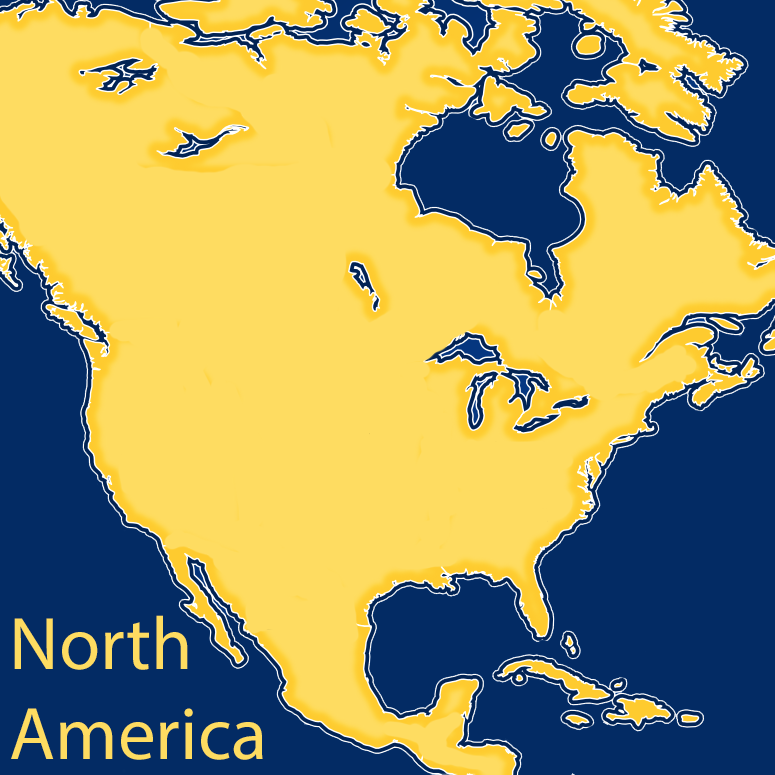
<style>
.page{position:relative;width:775px;height:775px;background:#fedc61}
.page>*{position:absolute;margin:0}
.t1{font:75px "MyriadPro-Regular";color:#fedc61}
</style>
<div class="page">
<p class="t1" style="left:11px;top:615px;width:252px;height:145px">North<br>America</p>
</div>
